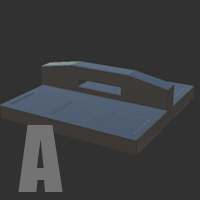
<style>
.page{position:relative;width:200px;height:200px;background:#313131}
.page>*{position:absolute;margin:0}
.t1{font:85.1px "Impact";color:#737373}
</style>
<div class="page">
<p class="t1" style="left:18px;top:125px;width:45px;height:67px">A</p>
</div>
